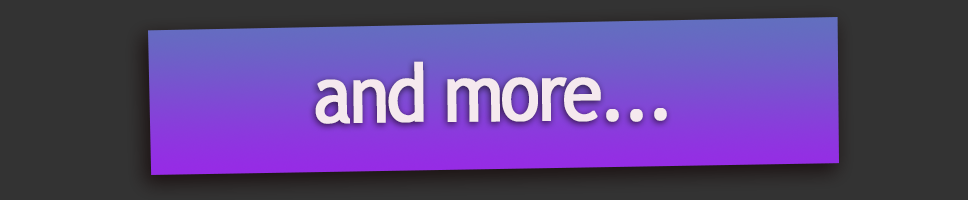
<style>
.page{position:relative;width:968px;height:200px;background:#333333}
.page>*{position:absolute;margin:0}
.t1{font:80px "TrebuchetMS";letter-spacing:-0.06em;color:#f5e9ee;font-weight:bold;scale:0.9 1}
</style>
<div class="page">
<p class="t1" style="left:315px;top:61px;width:352px;height:63px">and more...</p>
</div>
